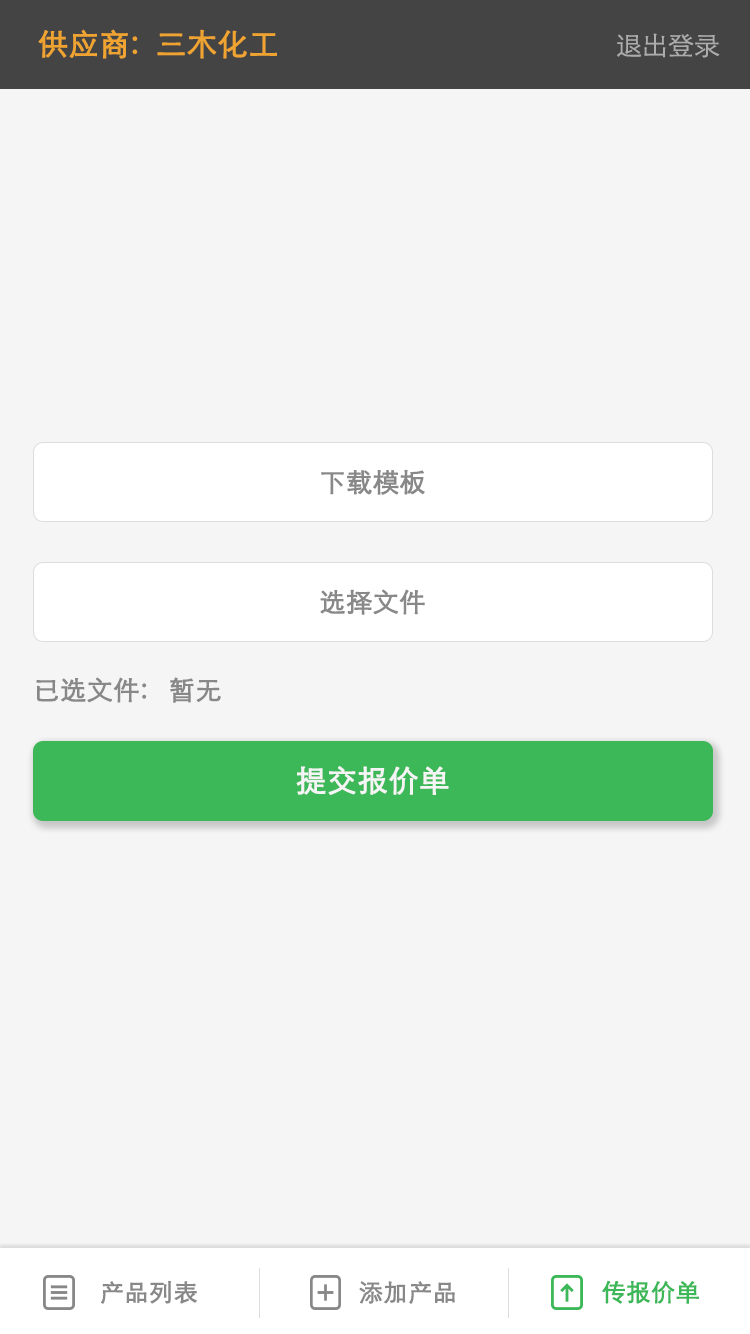
<style>
.page{position:relative;width:750px;height:1334px;background:#f5f5f5}
.page>*{position:absolute;margin:0}
.t1{font:30px "STXihei";color:#efa431;font-weight:bold}
.t2{font:26px "STXihei";color:#acacac}
.t3{font:26px "STXihei";color:#888888;font-weight:bold}
.t4{font:30px "STXihei";color:#f5f5f5;font-weight:bold}
.t5{font:24px "STXihei";color:#888888;font-weight:bold}
.t6{font:24px "STXihei";color:#3db858;font-weight:bold}
</style>
<div class="page">
<p class="t1" style="left:38px;top:29px;width:239px;height:30px">供应商:  三木化工</p>
<p class="t2" style="left:617px;top:33px;width:103px;height:25px">退出登录</p>
<p class="t3" style="left:321px;top:469px;width:104px;height:26px">下载模板</p>
<p class="t3" style="left:320px;top:589px;width:105px;height:26px">选择文件</p>
<p class="t3" style="left:36px;top:677px;width:111px;height:26px">已选文件:</p>
<p class="t3" style="left:170px;top:677px;width:51px;height:26px">暂无</p>
<p class="t4" style="left:296px;top:766px;width:153px;height:29px">提交报价单</p>
<p class="t5" style="left:101px;top:1280px;width:96px;height:24px">产品列表</p>
<p class="t5" style="left:359px;top:1281px;width:96px;height:23px">添加产品</p>
<p class="t6" style="left:602px;top:1280px;width:97px;height:24px">传报价单</p>
</div>
